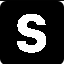
<style>
.page{position:relative;width:64px;height:64px;background:#000000}
.page>*{position:absolute;margin:0}
.t1{font:53.3px "SFMono-Heavy";color:#ffffff}
</style>
<div class="page">
<p class="t1" style="left:17px;top:13px;width:29px;height:39px">S</p>
</div>
